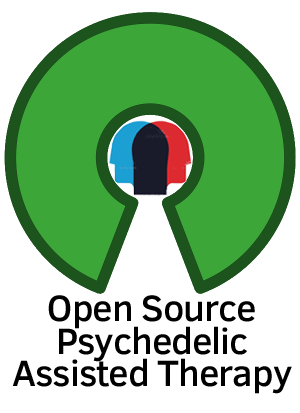
<style>
.page{position:relative;width:300px;height:413px;background:#ffffff}
.page>*{position:absolute;margin:0}
.t1{font:37.5px/32.5px "ClearSans-Medium";letter-spacing:-0.025em;color:#000000}
</style>
<div class="page">
<p class="t1" style="left:12px;top:295px;width:280px;height:99px;text-align:center">Open Source <br>Psychedelic <br>Assisted Therapy</p>
</div>
